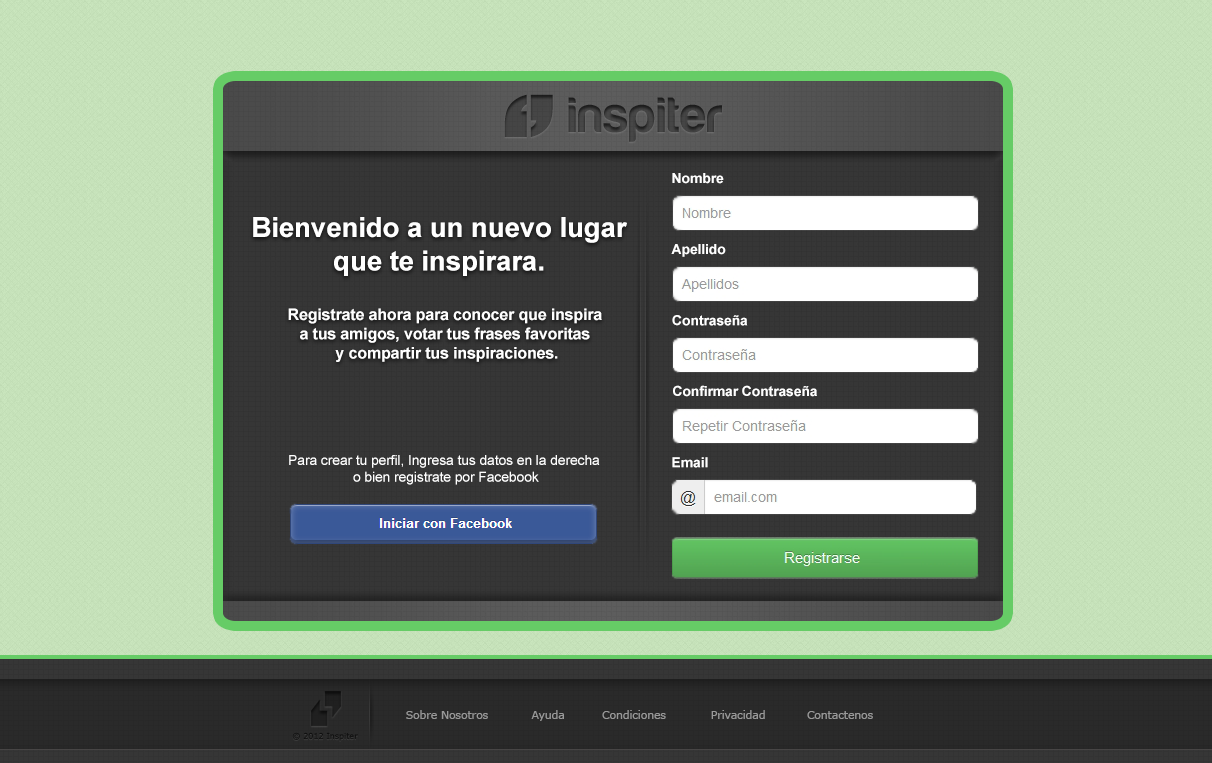
<style>
.page{position:relative;width:1212px;height:763px}
.page>*{position:absolute;margin:0}
.t1{font:164.4px "Impact";letter-spacing:-0.01em;color:#4a4949}
.t2{font:51.4px "Harabara-Bold";letter-spacing:0.03em;color:#333333}
.t3{font:14px "Arial-BoldMT";letter-spacing:-0.01em;color:#ffffff}
.t4{font:28px "Arial-BoldMT";letter-spacing:-0.01em;color:#ffffff}
.t5{font:16px "Arial-BoldMT";letter-spacing:-0.01em;color:#ffffff}
.t6{font:14px "ArialMT";letter-spacing:-0.01em;color:#ffffff}
.t7{font:10.7px "Verdana";color:#999999}
.t8{font:8px "Verdana";color:#101010}
</style>
<div class="page">
<p class="t1" style="left:504px;top:94px;width:49px;height:43px">‘’</p>
<p class="t2" style="left:568px;top:97px;width:154px;height:45px">inspiter</p>
<p class="t3" style="left:672px;top:173px;width:52px;height:11px">Nombre</p>
<p class="t4" style="left:253px;top:217px;width:374px;height:59px;text-align:center">Bienvenido a un nuevo lugar<br>que te inspirara.</p>
<p class="t3" style="left:671px;top:244px;width:55px;height:13px">Apellido</p>
<p class="t5" style="left:288px;top:308px;width:314px;height:54px;text-align:center">Registrate ahora para conocer que inspira <br>a tus amigos, votar tus frases favoritas <br>y compartir tus inspiraciones.</p>
<p class="t3" style="left:672px;top:315px;width:76px;height:11px">Contraseña</p>
<p class="t3" style="left:673px;top:385px;width:144px;height:12px">Confirmar Contraseña</p>
<p class="t6" style="left:289px;top:455px;width:311px;height:30px;text-align:center">Para crear tu perfil, Ingresa tus datos en la derecha<br> o bien registrate por Facebook</p>
<p class="t3" style="left:672px;top:457px;width:36px;height:11px">Email</p>
<p class="t7" style="left:406px;top:710px;width:82px;height:9px">Sobre Nosotros</p>
<p class="t7" style="left:531px;top:710px;width:33px;height:11px">Ayuda</p>
<p class="t7" style="left:602px;top:710px;width:64px;height:9px">Condiciones</p>
<p class="t7" style="left:711px;top:710px;width:54px;height:9px">Privacidad</p>
<p class="t7" style="left:807px;top:711px;width:66px;height:8px">Contactenos</p>
<p class="t8" style="left:292px;top:732px;width:66px;height:9px">© 2012 Inspiter</p>
</div>
